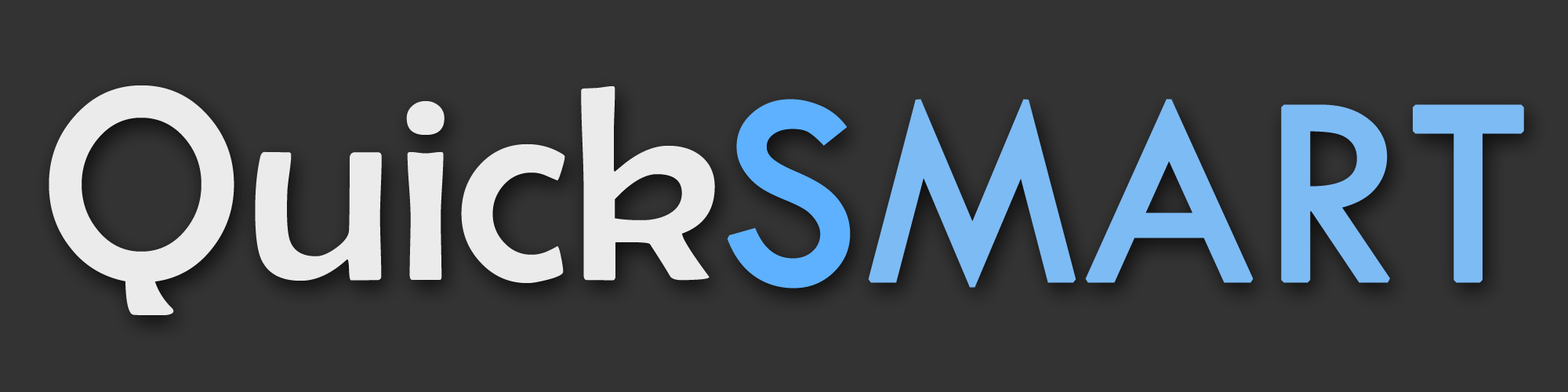
<style>
.page{position:relative;width:1568px;height:392px;background:#333333}
.page>*{position:absolute;margin:0}
.t1{font:277.4px "BerlinSansFB-Reg";color:#ebebeb}
.t2{font:277.4px "TwCenMT-Regular";color:#5eb1ff;font-weight:bold}
.t3{font:277.4px "TwCenMT-Regular";color:#7dbbf5;font-weight:bold}
</style>
<div class="page">
<p class="t1" style="left:49px;top:85px;width:1475px;height:230px">Quick<span class="t2">S</span><span class="t3">MART</span></p>
</div>
